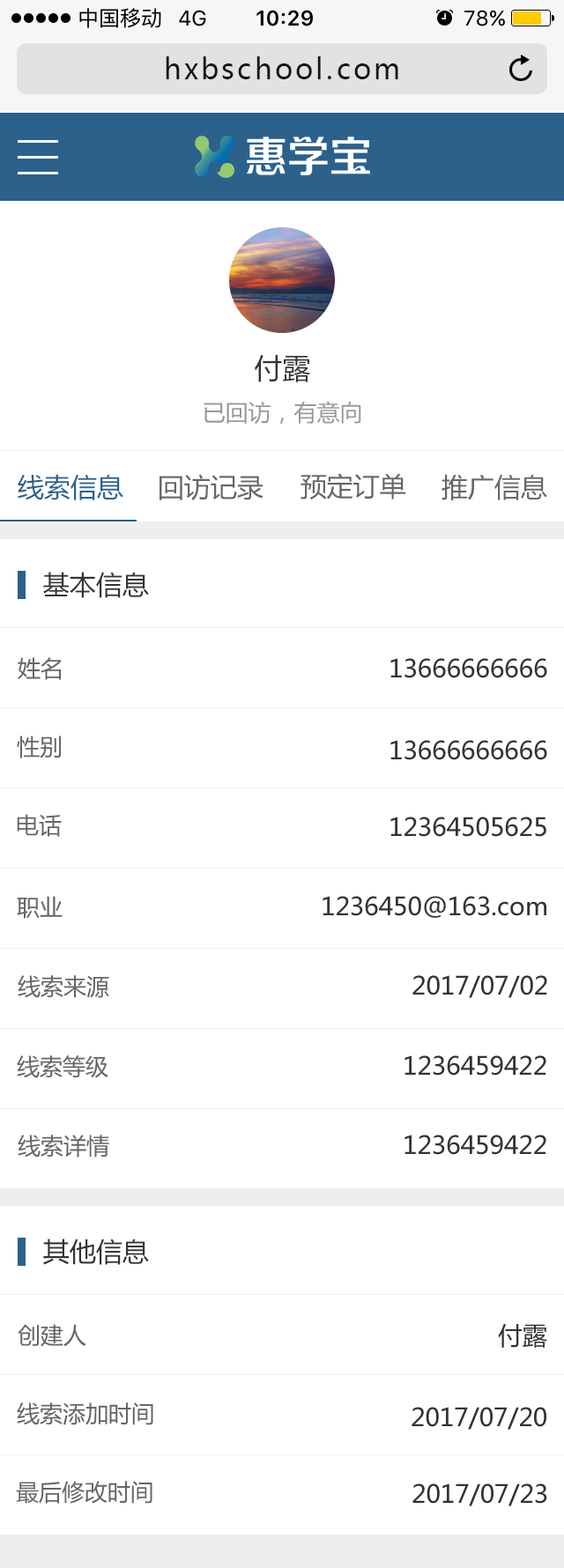
<style>
.page{position:relative;width:564px;height:1568px;background:#ffffff}
.page>*{position:absolute;margin:0}
.t1{font:28.2px "MicrosoftYaHei";letter-spacing:0.1em;color:#171717}
.t2{font:28.2px "MicrosoftYaHei";color:#333333}
.t3{font:22.9px "MicrosoftYaHei";color:#999999}
.t4{font:26.4px "MicrosoftYaHei";color:#2c618b}
.t5{font:26.4px "MicrosoftYaHei";color:#666666}
.t6{font:26.4px "MicrosoftYaHei";color:#333333}
.t7{font:22.9px "MicrosoftYaHei";color:#666666}
.t8{font:24.7px "MicrosoftYaHei";color:#333333}
</style>
<div class="page">
<p class="t1" style="left:166px;top:56px;width:232px;height:23px">hxbschool.com</p>
<p class="t2" style="left:255px;top:354px;width:55px;height:28px">付露</p>
<p class="t3" style="left:203px;top:401px;width:158px;height:24px">已回访，有意向</p>
<p class="t4" style="left:18px;top:474px;width:105px;height:26px">线索信息</p>
<p class="t5" style="left:159px;top:474px;width:104px;height:26px">回访记录</p>
<p class="t5" style="left:300px;top:473px;width:106px;height:26px">预定订单</p>
<p class="t5" style="left:441px;top:474px;width:106px;height:26px">推广信息</p>
<p class="t6" style="left:43px;top:572px;width:106px;height:26px">基本信息</p>
<p class="t7" style="left:18px;top:657px;width:43px;height:23px">姓名</p>
<p class="t8" style="left:390px;top:658px;width:157px;height:20px">13666666666</p>
<p class="t7" style="left:17px;top:736px;width:44px;height:22px">性别</p>
<p class="t8" style="left:390px;top:740px;width:157px;height:20px">13666666666</p>
<p class="t7" style="left:17px;top:814px;width:45px;height:23px">电话</p>
<p class="t8" style="left:390px;top:817px;width:156px;height:20px">12364505625</p>
<p class="t7" style="left:17px;top:896px;width:46px;height:23px">职业</p>
<p class="t8" style="left:322px;top:896px;width:224px;height:22px">1236450@163.com</p>
<p class="t7" style="left:18px;top:975px;width:91px;height:23px">线索来源</p>
<p class="t8" style="left:412px;top:975px;width:135px;height:23px">2017/07/02</p>
<p class="t7" style="left:17px;top:1055px;width:91px;height:23px">线索等级</p>
<p class="t8" style="left:404px;top:1055px;width:142px;height:21px">1236459422</p>
<p class="t7" style="left:18px;top:1135px;width:91px;height:23px">线索详情</p>
<p class="t8" style="left:404px;top:1135px;width:142px;height:20px">1236459422</p>
<p class="t6" style="left:43px;top:1239px;width:106px;height:26px">其他信息</p>
<p class="t7" style="left:18px;top:1324px;width:68px;height:23px">创建人</p>
<p class="t8" style="left:498px;top:1323px;width:49px;height:25px">付露</p>
<p class="t7" style="left:17px;top:1402px;width:136px;height:23px">线索添加时间</p>
<p class="t8" style="left:411px;top:1407px;width:135px;height:23px">2017/07/20</p>
<p class="t7" style="left:16px;top:1481px;width:136px;height:23px">最后修改时间</p>
<p class="t8" style="left:412px;top:1483px;width:135px;height:23px">2017/07/23</p>
</div>
